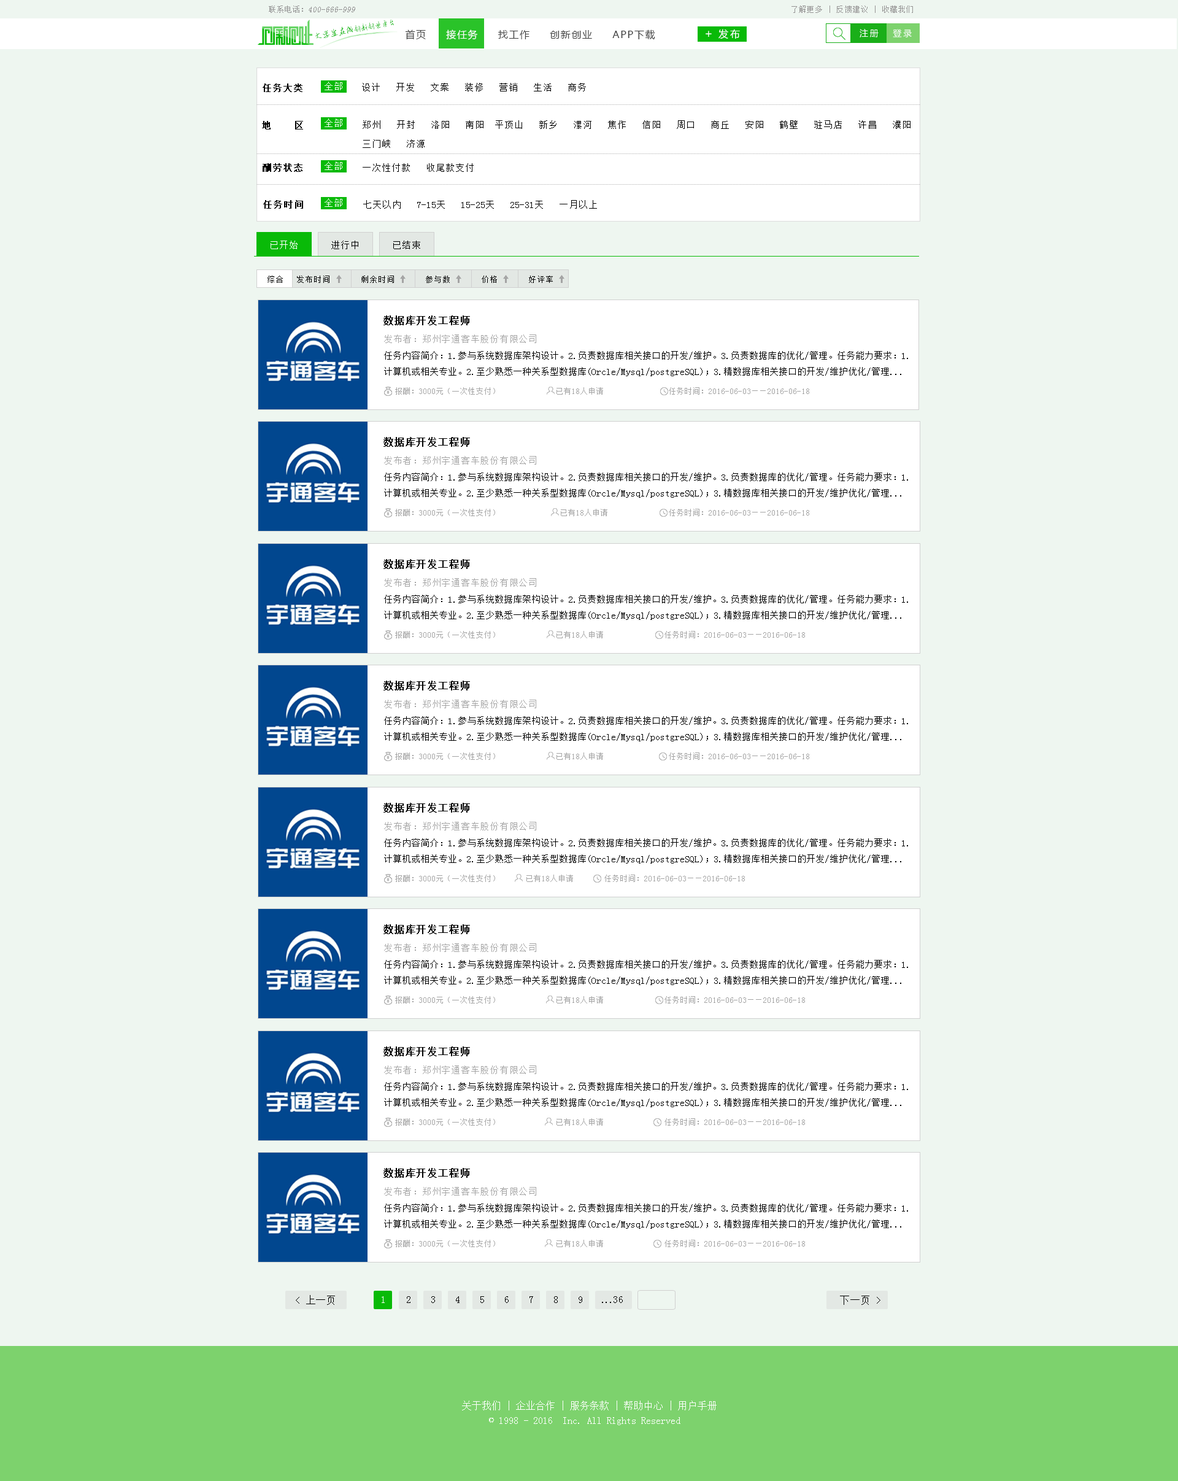
<style>
.page{position:relative;width:1178px;height:1481px;background:#eef6f0}
.page>*{position:absolute;margin:0}
.t1{font:8.2px "SimSun";color:#959595;font-style:italic}
.t2{font:8.2px "SimSun";color:#959595}
.t3{font:7.4px "SimSun";letter-spacing:0.1em;color:#959494}
.t4{font:7.6px "AnJingCheng-Xing-2.0";letter-spacing:-0.01em;color:#09ba08}
.t5{font:8.5px "AnJingCheng-Xing-2.0";letter-spacing:-0.01em;color:#09ba08}
.t6{font:9.8px "MicrosoftYaHei";letter-spacing:0.1em;color:#3e3e3e}
.t7{font:9.8px "MicrosoftYaHei";letter-spacing:0.1em;color:#ffffff}
.t8{font:9.8px "MicrosoftYaHei";letter-spacing:0.2em;color:#ffffff}
.t9{font:8.6px "MicrosoftYaHei";letter-spacing:0.2em;color:#ffffff}
.t10{font:11.5px "MicrosoftYaHei";letter-spacing:0.2em;color:#ffffff}
.t11{font:9px "NSimSun";color:#000000;font-weight:bold}
.t12{font:9px "NSimSun";color:#ffffff}
.t13{font:9px "NSimSun";color:#000000}
.t14{font:9px/19.6px "NSimSun";color:#000000}
.t15{font:8.2px "NSimSun";color:#000000}
.t16{font:9.8px "SimSun";letter-spacing:0.05em;color:#030303;font-weight:bold}
.t17{font:9px "SimSun";letter-spacing:0.05em;color:#a4a4a4}
.t18{font:9px "SimSun";color:#000000}
.t19{font:8.2px "SimSun";color:#a4a4a4}
.t20{font:9.8px "SimSun";letter-spacing:0.05em;color:#000000}
.t21{font:9.8px "SimSun";letter-spacing:0.05em;color:#ffffff}
.t22{font:9.8px "SimSun";letter-spacing:-0.1em;color:#000000}
.t23{font:9.8px/14.7px "SimSun";color:#ffffff}
</style>
<div class="page">
<p class="t1" style="left:269px;top:6px;width:86px;height:7px"><span class="t2">联系电话：</span>400-666-999</p>
<p class="t3" style="left:792px;top:6px;width:121px;height:7px">了解更多 | 反馈建议 | 收藏我们</p>
<p class="t4" style="left:315px;top:19px;width:80px;height:20px;rotate:-10deg"><span class="t5">大学生在线</span>创新创业平台</p>
<p class="t6" style="left:405px;top:29px;width:250px;height:11px">首页     <span class="t7">接任务 </span>    找工作     创新创业     APP下载</p>
<p class="t8" style="left:719px;top:29px;width:21px;height:10px">发布</p>
<p class="t9" style="left:860px;top:29px;width:52px;height:8px">注册   登录</p>
<p class="t10" style="left:706px;top:31px;width:6px;height:6px">+</p>
<p class="t11" style="left:263px;top:83px;width:40px;height:9px">任务大类</p>
<p class="t12" style="left:325px;top:82px;width:17px;height:8px">全部</p>
<p class="t13" style="left:362px;top:83px;width:224px;height:8px">设计   开发   文案   装修   营销   生活   商务</p>
<p class="t11" style="left:262px;top:121px;width:41px;height:8px">地    区</p>
<p class="t12" style="left:325px;top:118px;width:17px;height:9px">全部</p>
<p class="t14" style="left:363px;top:120px;width:548px;height:28px">郑州   开封   洛阳   南阳  平顶山   新乡   漯河   焦作   信阳   周口   商丘   安阳   鹤壁   驻马店   许昌   濮阳<br>三门峡   济源</p>
<p class="t12" style="left:325px;top:161px;width:17px;height:9px">全部</p>
<p class="t11" style="left:263px;top:163px;width:40px;height:9px">酬劳状态</p>
<p class="t13" style="left:363px;top:163px;width:111px;height:9px">一次性付款   收尾款支付</p>
<p class="t11" style="left:263px;top:200px;width:40px;height:9px">任务时间</p>
<p class="t12" style="left:325px;top:198px;width:17px;height:9px">全部</p>
<p class="t13" style="left:363px;top:200px;width:234px;height:9px">七天以内   7-15天   15-25天   25-31天   一月以上</p>
<p class="t12" style="left:271px;top:241px;width:27px;height:8px">已开始</p>
<p class="t13" style="left:331px;top:241px;width:27px;height:8px">进行中</p>
<p class="t13" style="left:393px;top:241px;width:27px;height:8px">已结束</p>
<p class="t15" style="left:268px;top:276px;width:15px;height:7px">综合</p>
<p class="t15" style="left:297px;top:276px;width:256px;height:7px">发布时间       剩余时间       参与数       价格       好评率</p>
<p class="t16" style="left:384px;top:315px;width:86px;height:10px">数据库开发工程师</p>
<p class="t17" style="left:384px;top:334px;width:152px;height:9px">发布者：郑州宇通客车股份有限公司</p>
<p class="t18" style="left:384px;top:351px;width:524px;height:25px">任务内容简介：1.参与系统数据库架构设计。2.负责数据库相关接口的开发/维护。3.负责数据库的优化/管理。任务能力要求：1.计算机或相关专业。2.至少熟悉一种关系型数据库(Orcle/Mysql/postgreSQL)；3.精数据库相关接口的开发/维护优化/管理...</p>
<p class="t19" style="left:395px;top:387px;width:414px;height:8px">报酬：3000元（一次性支付）             已有18人申请               任务时间：2016-06-03——2016-06-18</p>
<p class="t16" style="left:384px;top:437px;width:86px;height:10px">数据库开发工程师</p>
<p class="t17" style="left:384px;top:456px;width:152px;height:9px">发布者：郑州宇通客车股份有限公司</p>
<p class="t18" style="left:384px;top:473px;width:524px;height:25px">任务内容简介：1.参与系统数据库架构设计。2.负责数据库相关接口的开发/维护。3.负责数据库的优化/管理。任务能力要求：1.计算机或相关专业。2.至少熟悉一种关系型数据库(Orcle/Mysql/postgreSQL)；3.精数据库相关接口的开发/维护优化/管理...</p>
<p class="t19" style="left:395px;top:509px;width:414px;height:7px">报酬：3000元（一次性支付）              已有18人申请              任务时间：2016-06-03——2016-06-18</p>
<p class="t16" style="left:384px;top:559px;width:86px;height:10px">数据库开发工程师</p>
<p class="t17" style="left:384px;top:578px;width:152px;height:9px">发布者：郑州宇通客车股份有限公司</p>
<p class="t18" style="left:384px;top:595px;width:524px;height:25px">任务内容简介：1.参与系统数据库架构设计。2.负责数据库相关接口的开发/维护。3.负责数据库的优化/管理。任务能力要求：1.计算机或相关专业。2.至少熟悉一种关系型数据库(Orcle/Mysql/postgreSQL)；3.精数据库相关接口的开发/维护优化/管理...</p>
<p class="t19" style="left:395px;top:631px;width:410px;height:7px">报酬：3000元（一次性支付）             已有18人申请              任务时间：2016-06-03——2016-06-18</p>
<p class="t16" style="left:384px;top:681px;width:86px;height:9px">数据库开发工程师</p>
<p class="t17" style="left:384px;top:700px;width:152px;height:8px">发布者：郑州宇通客车股份有限公司</p>
<p class="t18" style="left:384px;top:716px;width:524px;height:25px">任务内容简介：1.参与系统数据库架构设计。2.负责数据库相关接口的开发/维护。3.负责数据库的优化/管理。任务能力要求：1.计算机或相关专业。2.至少熟悉一种关系型数据库(Orcle/Mysql/postgreSQL)；3.精数据库相关接口的开发/维护优化/管理...</p>
<p class="t19" style="left:395px;top:752px;width:414px;height:8px">报酬：3000元（一次性支付）             已有18人申请               任务时间：2016-06-03——2016-06-18</p>
<p class="t16" style="left:384px;top:803px;width:86px;height:10px">数据库开发工程师</p>
<p class="t17" style="left:384px;top:822px;width:152px;height:8px">发布者：郑州宇通客车股份有限公司</p>
<p class="t18" style="left:384px;top:838px;width:524px;height:26px">任务内容简介：1.参与系统数据库架构设计。2.负责数据库相关接口的开发/维护。3.负责数据库的优化/管理。任务能力要求：1.计算机或相关专业。2.至少熟悉一种关系型数据库(Orcle/Mysql/postgreSQL)；3.精数据库相关接口的开发/维护优化/管理...</p>
<p class="t19" style="left:395px;top:875px;width:350px;height:7px">报酬：3000元（一次性支付）      已有18人申请       任务时间：2016-06-03——2016-06-18</p>
<p class="t16" style="left:384px;top:924px;width:86px;height:10px">数据库开发工程师</p>
<p class="t17" style="left:384px;top:943px;width:152px;height:9px">发布者：郑州宇通客车股份有限公司</p>
<p class="t18" style="left:384px;top:960px;width:524px;height:25px">任务内容简介：1.参与系统数据库架构设计。2.负责数据库相关接口的开发/维护。3.负责数据库的优化/管理。任务能力要求：1.计算机或相关专业。2.至少熟悉一种关系型数据库(Orcle/Mysql/postgreSQL)；3.精数据库相关接口的开发/维护优化/管理...</p>
<p class="t19" style="left:395px;top:996px;width:410px;height:7px">报酬：3000元（一次性支付）             已有18人申请              任务时间：2016-06-03——2016-06-18</p>
<p class="t16" style="left:384px;top:1046px;width:86px;height:10px">数据库开发工程师</p>
<p class="t17" style="left:384px;top:1065px;width:152px;height:9px">发布者：郑州宇通客车股份有限公司</p>
<p class="t18" style="left:384px;top:1082px;width:524px;height:25px">任务内容简介：1.参与系统数据库架构设计。2.负责数据库相关接口的开发/维护。3.负责数据库的优化/管理。任务能力要求：1.计算机或相关专业。2.至少熟悉一种关系型数据库(Orcle/Mysql/postgreSQL)；3.精数据库相关接口的开发/维护优化/管理...</p>
<p class="t19" style="left:395px;top:1118px;width:410px;height:8px">报酬：3000元（一次性支付）             已有18人申请              任务时间：2016-06-03——2016-06-18</p>
<p class="t16" style="left:384px;top:1168px;width:86px;height:10px">数据库开发工程师</p>
<p class="t17" style="left:384px;top:1187px;width:152px;height:9px">发布者：郑州宇通客车股份有限公司</p>
<p class="t18" style="left:384px;top:1204px;width:524px;height:25px">任务内容简介：1.参与系统数据库架构设计。2.负责数据库相关接口的开发/维护。3.负责数据库的优化/管理。任务能力要求：1.计算机或相关专业。2.至少熟悉一种关系型数据库(Orcle/Mysql/postgreSQL)；3.精数据库相关接口的开发/维护优化/管理...</p>
<p class="t19" style="left:395px;top:1240px;width:410px;height:7px">报酬：3000元（一次性支付）             已有18人申请              任务时间：2016-06-03——2016-06-18</p>
<p class="t20" style="left:296px;top:1295px;width:39px;height:10px">&lt; 上一页</p>
<p class="t21" style="left:382px;top:1296px;width:3px;height:7px">1</p>
<p class="t20" style="left:407px;top:1296px;width:4px;height:7px">2</p>
<p class="t20" style="left:431px;top:1296px;width:4px;height:7px">3</p>
<p class="t20" style="left:456px;top:1296px;width:4px;height:7px">4</p>
<p class="t20" style="left:481px;top:1296px;width:3px;height:7px">5</p>
<p class="t20" style="left:505px;top:1296px;width:4px;height:7px">6</p>
<p class="t20" style="left:530px;top:1296px;width:3px;height:7px">7</p>
<p class="t20" style="left:554px;top:1296px;width:4px;height:7px">8</p>
<p class="t20" style="left:579px;top:1296px;width:3px;height:7px">9</p>
<p class="t22" style="left:602px;top:1296px;width:21px;height:7px">...<span class="t20">36</span></p>
<p class="t20" style="left:840px;top:1296px;width:41px;height:9px">下一页 &gt;</p>
<p class="t23" style="left:462px;top:1401px;width:255px;height:24px;text-align:center">关于我们 | 企业合作 | 服务条款 | 帮助中心 | 用户手册<br>© 1998 - 2016  Inc. All Rights Reserved</p>
</div>
